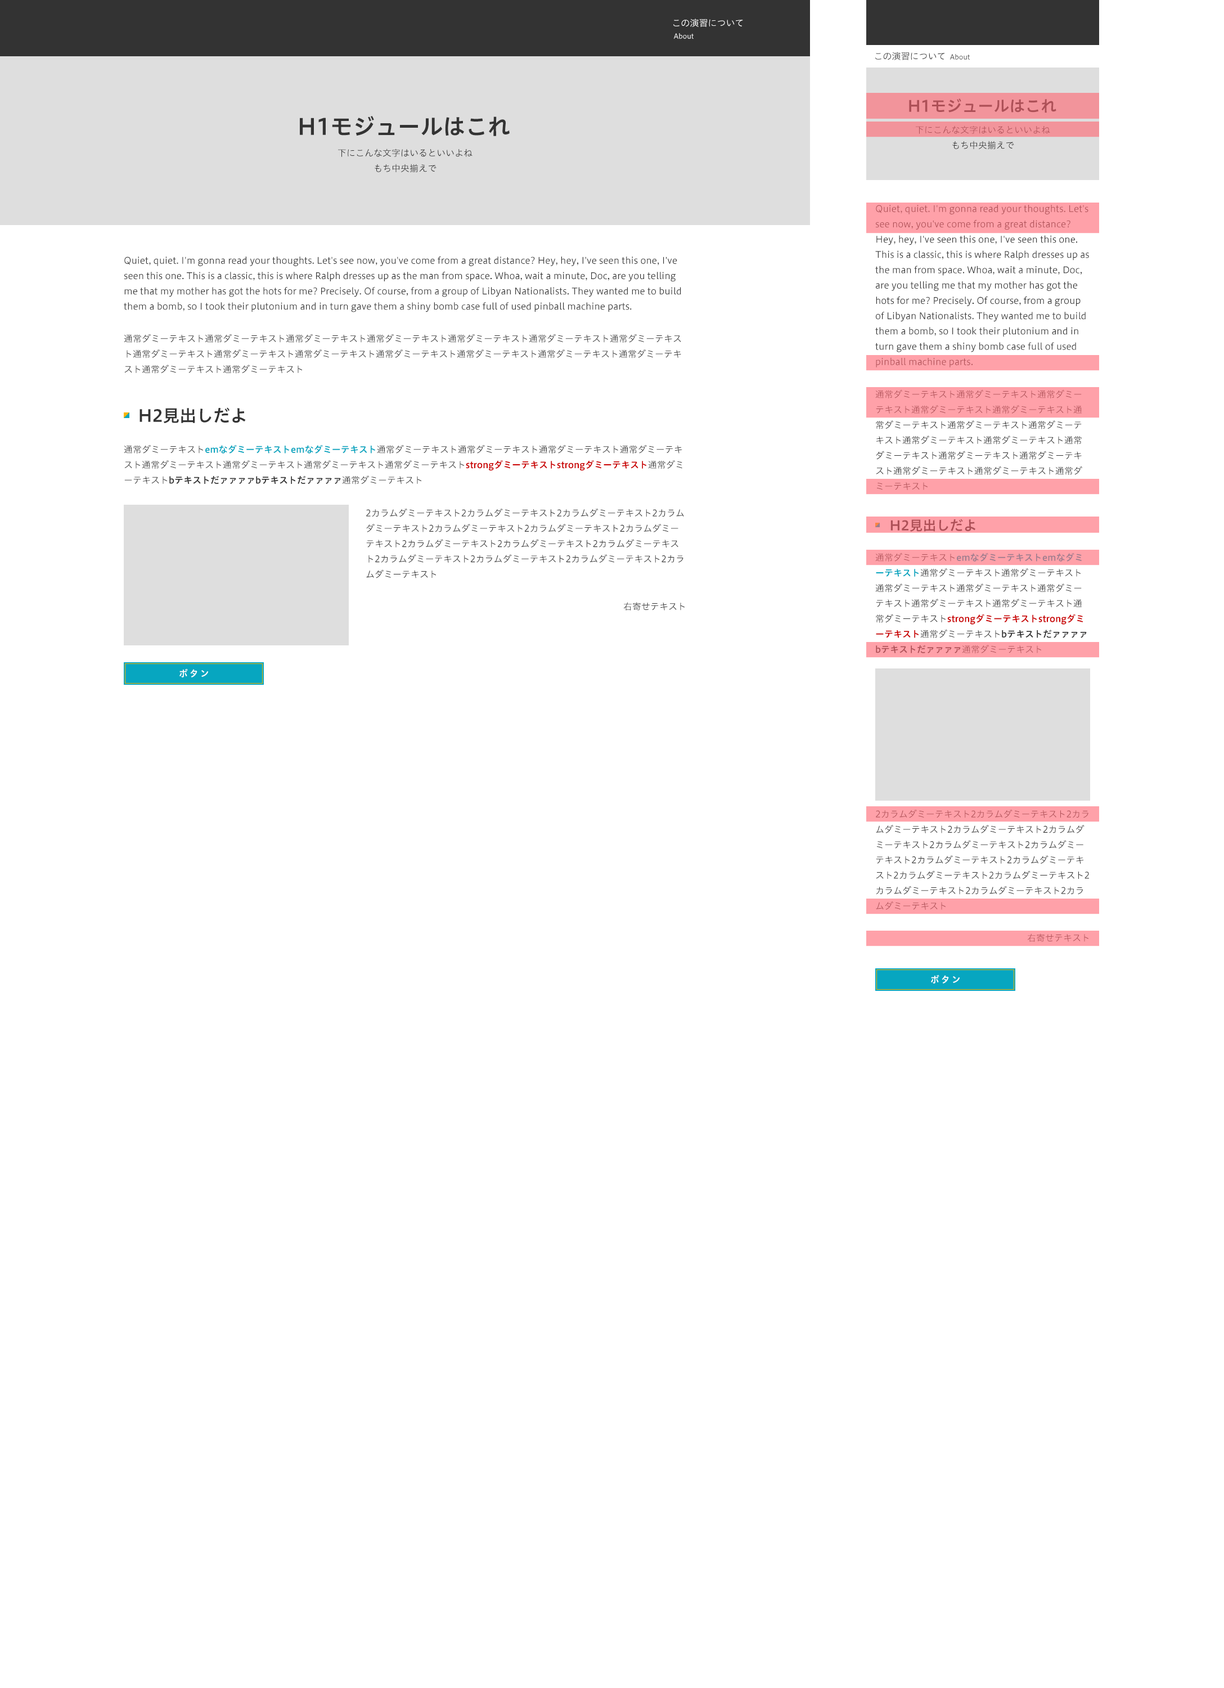
<style>
.page{position:relative;width:1224px;height:1688px;background:#ffffff}
.page>*{position:absolute;margin:0}
.t1{font:9px "HiraginoUDSansStd-W3";color:#ffffff}
.t2{font:6.8px "HiraginoUDSansStd-W3";color:#ffffff}
.t3{font:9px "HiraginoUDSansStd-W3";color:#333333}
.t4{font:6.8px "HiraginoUDSansStd-W3";color:#333333}
.t5{font:15.8px "HiraginoUDSansStd-W6";color:#ad5057}
.t6{font:22.5px "HiraginoUDSansStd-W6";color:#333333}
.t7{font:9px/15.3px "HiraginoUDSansStd-W3"}
.t8{font:9px/15.3px "HiraginoUDSansStd-W3";color:#333333}
.t9{font:16.9px "HiraginoUDSansStd-W6";color:#333333}
.t10{font:9px/15.3px "HiraginoUDSansStd-W6";color:#07a6c0}
.t11{font:9px/15.3px "HiraginoUDSansStd-W6";color:#ca0000}
.t12{font:9px/15.3px "HiraginoUDSansStd-W6";color:#333333}
.t13{font:13.5px "HiraginoUDSansStd-W6";color:#ad5057}
.t14{font:9px "HiraginoUDSansStd-W6";letter-spacing:0.18em;color:#ffffff}
.t15{font:9px "HiraginoUDSansStd-W3";color:#ad5057}
</style>
<div class="page">
<p class="t1" style="left:673px;top:19px;width:70px;height:8px">この演習について</p>
<p class="t2" style="left:674px;top:33px;width:20px;height:6px">About</p>
<p class="t3" style="left:875px;top:52px;width:70px;height:8px">この演習について</p>
<p class="t4" style="left:950px;top:54px;width:20px;height:6px">About</p>
<p class="t5" style="left:909px;top:98px;width:147px;height:15px">H1モジュールはこれ</p>
<p class="t6" style="left:300px;top:116px;width:210px;height:20px">H1モジュールはこれ</p>
<p class="t7" style="left:916px;top:125px;width:134px;height:24px;text-align:center">下にこんな文字はいるといいよね<br>もち中央揃えで</p>
<p class="t8" style="left:338px;top:148px;width:134px;height:24px;text-align:center">下にこんな文字はいるといいよね<br>もち中央揃えで</p>
<p class="t8" style="left:875px;top:205px;width:214px;height:162px">Quiet, quiet. I'm gonna read your thoughts. Let's see now, you've come from a great distance? Hey, hey, I've seen this one, I've seen this one. This is a classic, this is where Ralph dresses up as the man from space. Whoa, wait a minute, Doc, are you telling me that my mother has got the hots for me? Precisely. Of course, from a group of Libyan Nationalists. They wanted me to build them a bomb, so I took their plutonium and in turn gave them a shiny bomb case full of used pinball machine parts.</p>
<p class="t8" style="left:124px;top:256px;width:557px;height:56px">Quiet, quiet. I'm gonna read your thoughts. Let's see now, you've come from a great distance? Hey, hey, I've seen this one, I've seen this one. This is a classic, this is where Ralph dresses up as the man from space. Whoa, wait a minute, Doc, are you telling me that my mother has got the hots for me? Precisely. Of course, from a group of Libyan Nationalists. They wanted me to build them a bomb, so I took their plutonium and in turn gave them a shiny bomb case full of used pinball machine parts.</p>
<p class="t8" style="left:124px;top:334px;width:557px;height:40px">通常ダミーテキスト通常ダミーテキスト通常ダミーテキスト通常ダミーテキスト通常ダミーテキスト通常ダミーテキスト通常ダミーテキスト通常ダミーテキスト通常ダミーテキスト通常ダミーテキスト通常ダミーテキスト通常ダミーテキスト通常ダミーテキスト通常ダミーテキスト通常ダミーテキスト通常ダミーテキスト</p>
<p class="t8" style="left:875px;top:389px;width:207px;height:101px">通常ダミーテキスト通常ダミーテキスト通常ダミーテキスト通常ダミーテキスト通常ダミーテキスト通常ダミーテキスト通常ダミーテキスト通常ダミーテキスト通常ダミーテキスト通常ダミーテキスト通常ダミーテキスト通常ダミーテキスト通常ダミーテキスト通常ダミーテキスト通常ダミーテキスト通常ダミーテキスト</p>
<p class="t9" style="left:140px;top:407px;width:106px;height:17px">H2見出しだよ</p>
<p class="t8" style="left:124px;top:444px;width:558px;height:40px">通常ダミーテキスト<span class="t10">emなダミーテキストemなダミーテキスト</span>通常ダミーテキスト通常ダミーテキスト通常ダミーテキスト通常ダミーテキスト通常ダミーテキスト通常ダミーテキスト通常ダミーテキスト通常ダミーテキスト<span class="t11">strongダミーテキストstrongダミーテキスト</span>通常ダミーテキスト<span class="t12">bテキストだァァァァbテキストだァァァァ</span>通常ダミーテキスト</p>
<p class="t8" style="left:366px;top:508px;width:318px;height:70px">2カラムダミーテキスト2カラムダミーテキスト2カラムダミーテキスト2カラムダミーテキスト2カラムダミーテキスト2カラムダミーテキスト2カラムダミーテキスト2カラムダミーテキスト2カラムダミーテキスト2カラムダミーテキスト2カラムダミーテキスト2カラムダミーテキスト2カラムダミーテキスト2カラムダミーテキスト</p>
<p class="t13" style="left:890px;top:519px;width:85px;height:13px">H2見出しだよ</p>
<p class="t8" style="left:875px;top:552px;width:212px;height:102px">通常ダミーテキスト<span class="t10">emなダミーテキストemなダミーテキスト</span>通常ダミーテキスト通常ダミーテキスト通常ダミーテキスト通常ダミーテキスト通常ダミーテキスト通常ダミーテキスト通常ダミーテキスト通常ダミーテキスト<span class="t11">strongダミーテキストstrongダミーテキスト</span>通常ダミーテキスト<span class="t12">bテキストだァァァァbテキストだァァァァ</span>通常ダミーテキスト</p>
<p class="t3" style="left:624px;top:602px;width:61px;height:8px">右寄せテキスト</p>
<p class="t14" style="left:179px;top:668px;width:30px;height:9px">ボタン</p>
<p class="t8" style="left:876px;top:809px;width:213px;height:101px">2カラムダミーテキスト2カラムダミーテキスト2カラムダミーテキスト2カラムダミーテキスト2カラムダミーテキスト2カラムダミーテキスト2カラムダミーテキスト2カラムダミーテキスト2カラムダミーテキスト2カラムダミーテキスト2カラムダミーテキスト2カラムダミーテキスト2カラムダミーテキスト2カラムダミーテキスト</p>
<p class="t15" style="left:1028px;top:933px;width:60px;height:9px">右寄せテキスト</p>
<p class="t14" style="left:931px;top:974px;width:29px;height:9px">ボタン</p>
</div>
